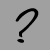
<style>
.page{position:relative;width:50px;height:50px;background:#a0a0a0}
.page>*{position:absolute;margin:0}
.t1{font:36px "Kosalsayshy";color:#000000}
</style>
<div class="page">
<p class="t1" style="left:15px;top:8px;width:24px;height:35px">?</p>
</div>
